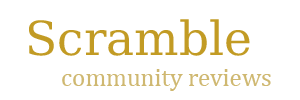
<style>
.page{position:relative;width:300px;height:100px;background:#ffffff}
.page>*{position:absolute;margin:0}
.t1{font:47px "DejaVuMathTeXGyre-Regular";color:#c29b24}
.t2{font:25px "Cambria";color:#cfb871}
</style>
<div class="page">
<p class="t1" style="left:29px;top:19px;width:221px;height:37px">Scramble</p>
<p class="t2" style="left:62px;top:69px;width:209px;height:22px">community reviews</p>
</div>
